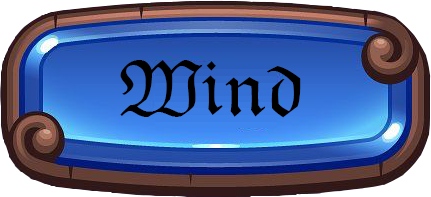
<style>
.page{position:relative;width:431px;height:197px}
.page>*{position:absolute;margin:0}
.t1{font:80px "EuclidFraktur";color:#000000}
</style>
<div class="page">
<p class="t1" style="left:120px;top:60px;width:181px;height:58px">Wind</p>
</div>
